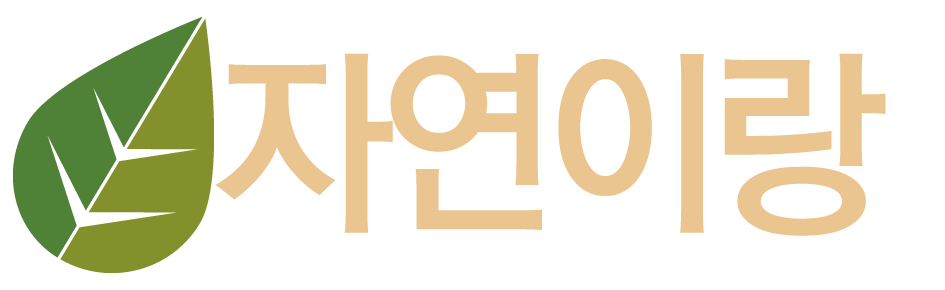
<style>
.page{position:relative;width:945px;height:290px;background:#ffffff}
.page>*{position:absolute;margin:0}
.t1{font:200px "RixGoB";letter-spacing:-0.075em;color:#ebc58f}
</style>
<div class="page">
<p class="t1" style="left:215px;top:53px;width:671px;height:183px">자연이랑</p>
</div>
